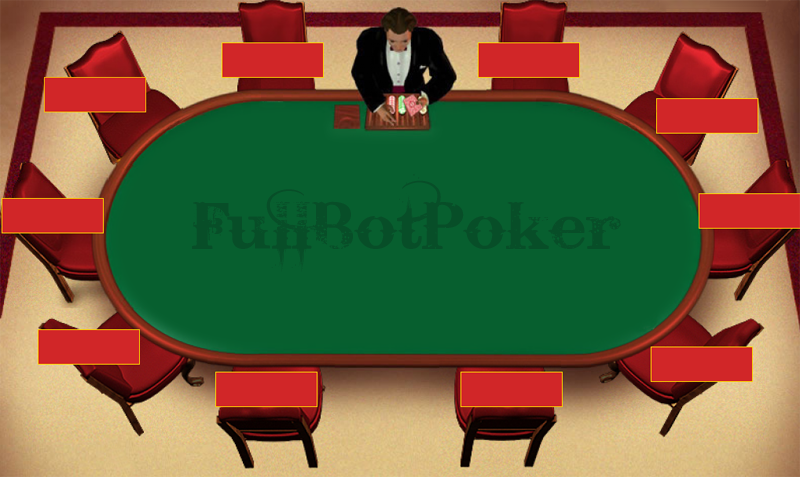
<style>
.page{position:relative;width:800px;height:477px;background:#075f2f}
.page>*{position:absolute;margin:0}
.t1{font:65.2px "BleedingCowboys";letter-spacing:0.025em;color:#074e28;scale:1.08 1}
</style>
<div class="page">
<p class="t1" style="left:192px;top:173px;width:429px;height:99px">FullBotPoker</p>
</div>
